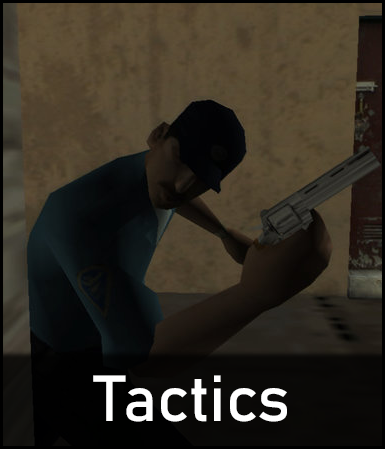
<style>
.page{position:relative;width:385px;height:449px}
.page>*{position:absolute;margin:0}
.t1{font:64px "Bahnschrift";color:#ffffff}
</style>
<div class="page">
<p class="t1" style="left:93px;top:375px;width:194px;height:47px">Tactics</p>
</div>
